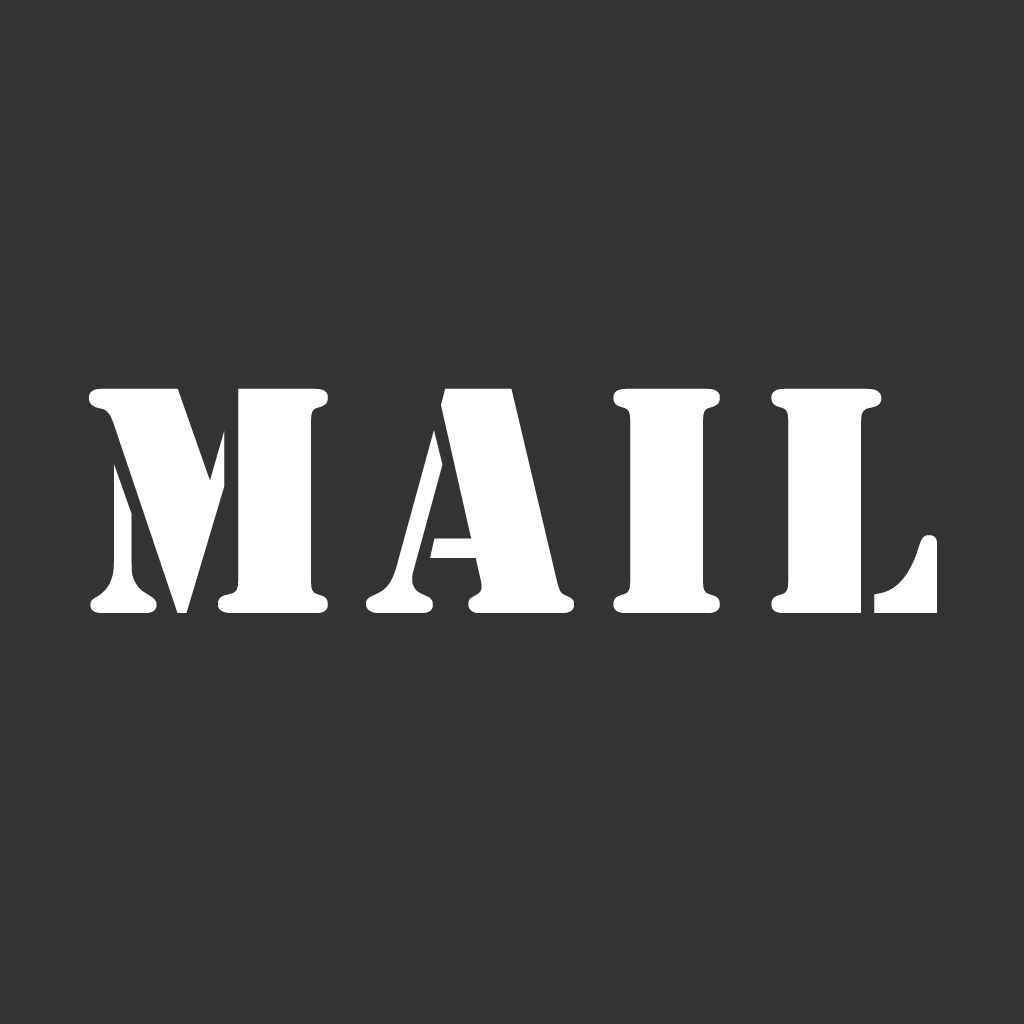
<style>
.page{position:relative;width:1024px;height:1024px;background:#333333}
.page>*{position:absolute;margin:0}
.t1{font:336px "Stencil";letter-spacing:0.075em;color:#ffffff}
</style>
<div class="page">
<p class="t1" style="left:88px;top:388px;width:849px;height:225px">MAIL</p>
</div>
